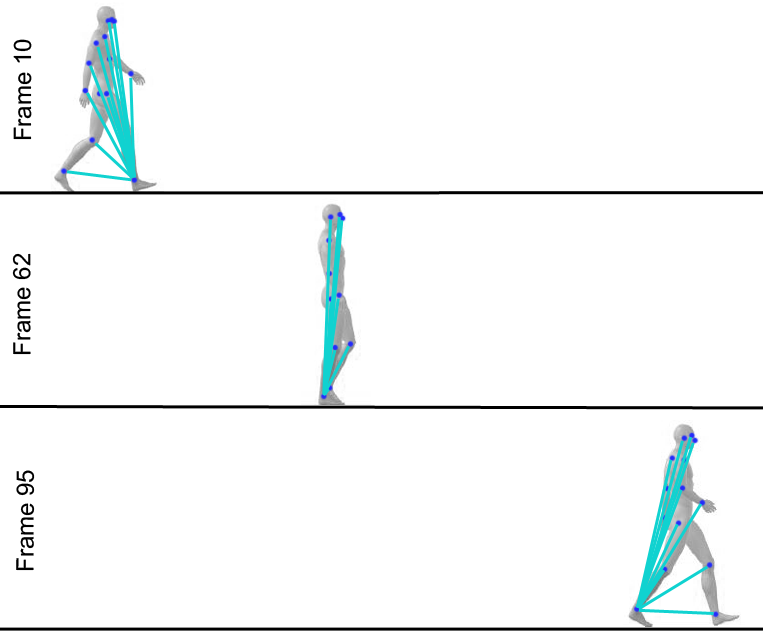
<style>
.page{position:relative;width:763px;height:631px;background:#ffffff}
.page>*{position:absolute;margin:0}
.t1{font:24px "ArialMT";color:#000000}
</style>
<div class="page">
<p class="t1" style="left:13px;top:39px;width:19px;height:101px;rotate:-90deg">Frame 10</p>
<p class="t1" style="left:12px;top:253px;width:19px;height:102px;rotate:-90deg">Frame 62</p>
<p class="t1" style="left:16px;top:470px;width:19px;height:101px;rotate:-90deg">Frame 95</p>
</div>
